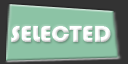
<style>
.page{position:relative;width:128px;height:64px;background:#8cc3a5}
.page>*{position:absolute;margin:0}
.t1{font:24px "Bauhaus93";color:#ffffff}
</style>
<div class="page">
<p class="t1" style="left:11px;top:26px;width:100px;height:16px">SELECTED</p>
</div>
